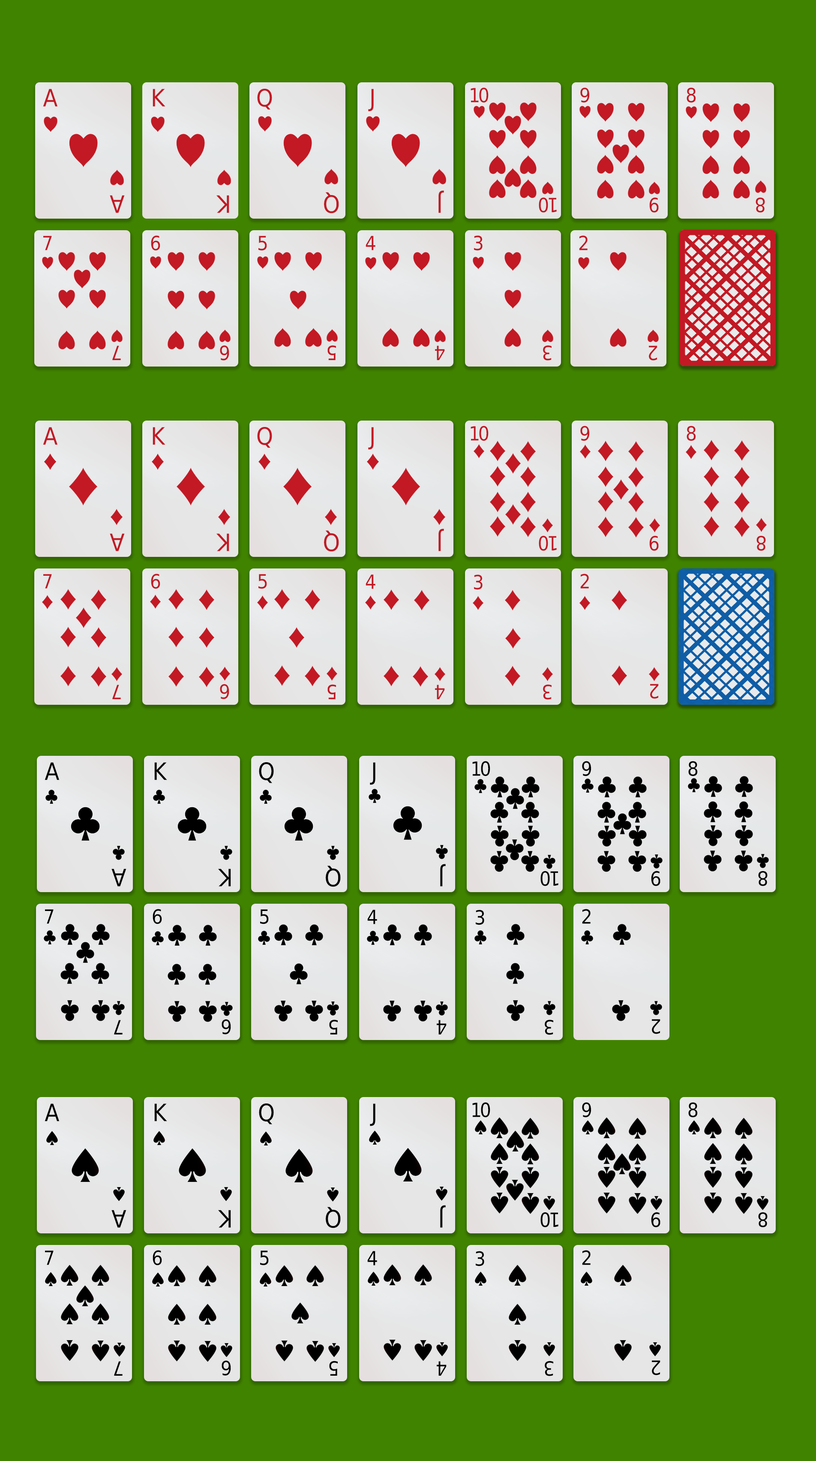
<style>
.page{position:relative;width:816px;height:1461px;background:#408300}
.page>*{position:absolute;margin:0}
.t1{font:23.9px "DejaVuSansCondensed";color:#c21924;text-transform:uppercase}
.t2{font:19.6px "DejaVuSansCondensed";letter-spacing:-0.1em;color:#c21924;text-transform:uppercase}
.t3{font:19.6px "DejaVuSansCondensed";color:#c21924;text-transform:uppercase}
.t4{font:24px "DejaVuSansCondensed";color:#c21924;text-transform:uppercase}
.t5{font:19.7px "DejaVuSansCondensed";letter-spacing:-0.1em;color:#c21924;text-transform:uppercase}
.t6{font:19.7px "DejaVuSansCondensed";color:#c21924;text-transform:uppercase}
.t7{font:19.6px "DejaVuSansCondensed";letter-spacing:-0.1em;color:#000000;text-transform:uppercase}
.t8{font:19.6px "DejaVuSansCondensed";color:#000000;text-transform:uppercase}
.t9{font:23.9px "DejaVuSansCondensed";color:#000000;text-transform:uppercase}
.t10{font:24px "DejaVuSansCondensed";color:#000000;text-transform:uppercase}
.t11{font:19.7px "DejaVuSansCondensed";letter-spacing:-0.1em;color:#000000;text-transform:uppercase}
.t12{font:19.7px "DejaVuSansCondensed";color:#000000;text-transform:uppercase}
</style>
<div class="page">
<p class="t1" style="left:43px;top:89px;width:15px;height:18px">A</p>
<p class="t1" style="left:153px;top:89px;width:12px;height:18px">k</p>
<p class="t1" style="left:257px;top:89px;width:15px;height:21px">Q</p>
<p class="t1" style="left:368px;top:89px;width:6px;height:22px">J</p>
<p class="t2" style="left:471px;top:87px;width:18px;height:16px">10</p>
<p class="t3" style="left:580px;top:87px;width:9px;height:16px">9</p>
<p class="t3" style="left:687px;top:87px;width:9px;height:16px">8</p>
<p class="t4" style="left:110px;top:195px;width:15px;height:18px;rotate:180deg">A</p>
<p class="t4" style="left:216px;top:195px;width:13px;height:18px;rotate:180deg">k</p>
<p class="t4" style="left:324px;top:192px;width:15px;height:21px;rotate:180deg">Q</p>
<p class="t4" style="left:439px;top:190px;width:5px;height:23px;rotate:180deg">J</p>
<p class="t5" style="left:539px;top:197px;width:18px;height:16px;rotate:180deg">10</p>
<p class="t6" style="left:649px;top:197px;width:10px;height:16px;rotate:180deg">9</p>
<p class="t6" style="left:756px;top:197px;width:9px;height:16px;rotate:180deg">8</p>
<p class="t3" style="left:43px;top:236px;width:9px;height:14px">7</p>
<p class="t3" style="left:151px;top:235px;width:9px;height:16px">6</p>
<p class="t3" style="left:258px;top:236px;width:9px;height:15px">5</p>
<p class="t3" style="left:366px;top:236px;width:10px;height:14px">4</p>
<p class="t3" style="left:474px;top:235px;width:9px;height:16px">3</p>
<p class="t3" style="left:579px;top:235px;width:9px;height:15px">2</p>
<p class="t6" style="left:112px;top:346px;width:9px;height:14px;rotate:180deg">7</p>
<p class="t6" style="left:220px;top:345px;width:9px;height:16px;rotate:180deg">6</p>
<p class="t6" style="left:328px;top:345px;width:8px;height:15px;rotate:180deg">5</p>
<p class="t6" style="left:435px;top:346px;width:10px;height:14px;rotate:180deg">4</p>
<p class="t6" style="left:543px;top:345px;width:9px;height:16px;rotate:180deg">3</p>
<p class="t6" style="left:649px;top:346px;width:9px;height:15px;rotate:180deg">2</p>
<p class="t2" style="left:471px;top:426px;width:18px;height:15px">10</p>
<p class="t3" style="left:580px;top:426px;width:9px;height:15px">9</p>
<p class="t3" style="left:687px;top:426px;width:9px;height:15px">8</p>
<p class="t1" style="left:43px;top:427px;width:15px;height:18px">A</p>
<p class="t1" style="left:153px;top:427px;width:12px;height:18px">k</p>
<p class="t1" style="left:257px;top:427px;width:15px;height:21px">Q</p>
<p class="t1" style="left:368px;top:427px;width:6px;height:23px">J</p>
<p class="t4" style="left:110px;top:533px;width:15px;height:18px;rotate:180deg">A</p>
<p class="t4" style="left:216px;top:533px;width:13px;height:18px;rotate:180deg">k</p>
<p class="t4" style="left:324px;top:530px;width:15px;height:22px;rotate:180deg">Q</p>
<p class="t4" style="left:439px;top:529px;width:5px;height:22px;rotate:180deg">J</p>
<p class="t5" style="left:539px;top:535px;width:18px;height:16px;rotate:180deg">10</p>
<p class="t6" style="left:649px;top:535px;width:10px;height:16px;rotate:180deg">9</p>
<p class="t6" style="left:757px;top:535px;width:9px;height:16px;rotate:180deg">8</p>
<p class="t3" style="left:43px;top:574px;width:9px;height:15px">7</p>
<p class="t3" style="left:151px;top:574px;width:9px;height:15px">6</p>
<p class="t3" style="left:258px;top:574px;width:9px;height:15px">5</p>
<p class="t3" style="left:366px;top:574px;width:10px;height:15px">4</p>
<p class="t3" style="left:474px;top:574px;width:9px;height:16px">3</p>
<p class="t3" style="left:580px;top:574px;width:9px;height:15px">2</p>
<p class="t6" style="left:112px;top:685px;width:9px;height:14px;rotate:180deg">7</p>
<p class="t6" style="left:220px;top:684px;width:9px;height:15px;rotate:180deg">6</p>
<p class="t6" style="left:328px;top:684px;width:8px;height:15px;rotate:180deg">5</p>
<p class="t6" style="left:435px;top:685px;width:10px;height:14px;rotate:180deg">4</p>
<p class="t6" style="left:543px;top:684px;width:9px;height:16px;rotate:180deg">3</p>
<p class="t6" style="left:650px;top:684px;width:9px;height:15px;rotate:180deg">2</p>
<p class="t7" style="left:472px;top:761px;width:18px;height:15px">10</p>
<p class="t8" style="left:582px;top:761px;width:9px;height:15px">9</p>
<p class="t8" style="left:688px;top:761px;width:10px;height:15px">8</p>
<p class="t9" style="left:45px;top:762px;width:15px;height:18px">A</p>
<p class="t9" style="left:154px;top:762px;width:13px;height:18px">k</p>
<p class="t9" style="left:259px;top:762px;width:15px;height:21px">Q</p>
<p class="t9" style="left:370px;top:762px;width:6px;height:23px">J</p>
<p class="t10" style="left:111px;top:869px;width:15px;height:18px;rotate:180deg">A</p>
<p class="t10" style="left:218px;top:869px;width:13px;height:18px;rotate:180deg">k</p>
<p class="t10" style="left:326px;top:866px;width:15px;height:21px;rotate:180deg">Q</p>
<p class="t10" style="left:440px;top:864px;width:6px;height:23px;rotate:180deg">J</p>
<p class="t11" style="left:541px;top:871px;width:18px;height:15px;rotate:180deg">10</p>
<p class="t12" style="left:651px;top:871px;width:10px;height:15px;rotate:180deg">9</p>
<p class="t12" style="left:758px;top:871px;width:10px;height:15px;rotate:180deg">8</p>
<p class="t8" style="left:45px;top:909px;width:9px;height:15px">7</p>
<p class="t8" style="left:153px;top:909px;width:9px;height:15px">6</p>
<p class="t8" style="left:260px;top:909px;width:9px;height:15px">5</p>
<p class="t8" style="left:367px;top:910px;width:10px;height:14px">4</p>
<p class="t8" style="left:476px;top:910px;width:8px;height:15px">3</p>
<p class="t8" style="left:582px;top:909px;width:9px;height:15px">2</p>
<p class="t12" style="left:114px;top:1020px;width:9px;height:14px;rotate:180deg">7</p>
<p class="t12" style="left:222px;top:1019px;width:9px;height:15px;rotate:180deg">6</p>
<p class="t12" style="left:329px;top:1019px;width:9px;height:15px;rotate:180deg">5</p>
<p class="t12" style="left:437px;top:1020px;width:10px;height:14px;rotate:180deg">4</p>
<p class="t12" style="left:545px;top:1019px;width:8px;height:16px;rotate:180deg">3</p>
<p class="t12" style="left:652px;top:1019px;width:9px;height:15px;rotate:180deg">2</p>
<p class="t9" style="left:45px;top:1103px;width:15px;height:18px">A</p>
<p class="t9" style="left:154px;top:1103px;width:13px;height:18px">k</p>
<p class="t9" style="left:259px;top:1103px;width:15px;height:21px">Q</p>
<p class="t9" style="left:370px;top:1103px;width:6px;height:23px">J</p>
<p class="t7" style="left:472px;top:1102px;width:18px;height:16px">10</p>
<p class="t8" style="left:582px;top:1102px;width:9px;height:16px">9</p>
<p class="t8" style="left:688px;top:1102px;width:10px;height:16px">8</p>
<p class="t10" style="left:440px;top:1205px;width:6px;height:23px;rotate:180deg">J</p>
<p class="t10" style="left:111px;top:1210px;width:15px;height:18px;rotate:180deg">A</p>
<p class="t10" style="left:218px;top:1210px;width:13px;height:18px;rotate:180deg">k</p>
<p class="t10" style="left:326px;top:1207px;width:15px;height:21px;rotate:180deg">Q</p>
<p class="t11" style="left:541px;top:1212px;width:18px;height:15px;rotate:180deg">10</p>
<p class="t12" style="left:651px;top:1212px;width:10px;height:15px;rotate:180deg">9</p>
<p class="t12" style="left:758px;top:1212px;width:10px;height:15px;rotate:180deg">8</p>
<p class="t8" style="left:45px;top:1250px;width:9px;height:15px">7</p>
<p class="t8" style="left:153px;top:1250px;width:9px;height:15px">6</p>
<p class="t8" style="left:260px;top:1250px;width:9px;height:15px">5</p>
<p class="t8" style="left:367px;top:1251px;width:10px;height:14px">4</p>
<p class="t8" style="left:476px;top:1251px;width:8px;height:15px">3</p>
<p class="t8" style="left:582px;top:1250px;width:9px;height:15px">2</p>
<p class="t12" style="left:114px;top:1361px;width:9px;height:15px;rotate:180deg">7</p>
<p class="t12" style="left:222px;top:1360px;width:9px;height:16px;rotate:180deg">6</p>
<p class="t12" style="left:329px;top:1361px;width:9px;height:15px;rotate:180deg">5</p>
<p class="t12" style="left:437px;top:1361px;width:10px;height:15px;rotate:180deg">4</p>
<p class="t12" style="left:545px;top:1361px;width:8px;height:15px;rotate:180deg">3</p>
<p class="t12" style="left:652px;top:1360px;width:9px;height:15px;rotate:180deg">2</p>
</div>
